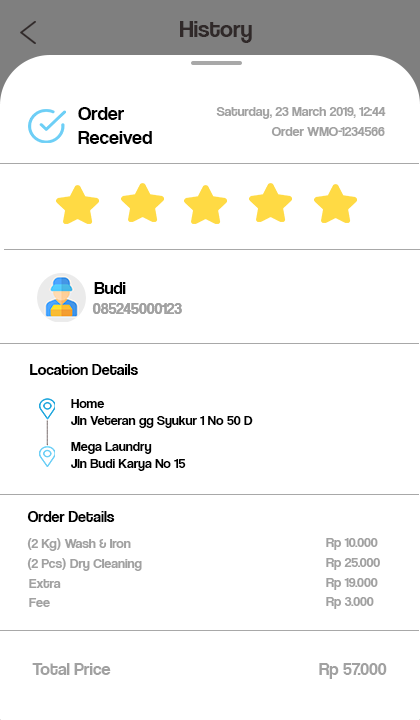
<style>
.page{position:relative;width:420px;height:720px;background:#ffffff}
.page>*{position:absolute;margin:0}
.t1{font:24px "CoolveticaRg-Regular";color:#302929}
.t2{font:20px "CoolveticaRg-Regular";color:#000000}
.t3{font:14px "CoolveticaRg-Regular";color:#a1a1a1}
.t4{font:18px "CoolveticaRg-Regular";color:#010101}
.t5{font:16px "CoolveticaRg-Regular";color:#a1a1a1}
.t6{font:16px "CoolveticaRg-Regular";color:#000000}
.t7{font:14px "CoolveticaRg-Regular";color:#000000}
.t8{font:16px "CoolveticaRg-Regular";color:#010101}
.t9{font:18px "CoolveticaRg-Regular";color:#a1a1a1}
</style>
<div class="page">
<p class="t1" style="left:180px;top:21px;width:72px;height:22px">History</p>
<p class="t2" style="left:78px;top:107px;width:74px;height:37px">Order<br>Received</p>
<p class="t3" style="left:216px;top:107px;width:170px;height:12px">Saturday, 23 March 2019, 12:44</p>
<p class="t3" style="left:271px;top:127px;width:114px;height:9px">Order WMO-1234566</p>
<p class="t4" style="left:94px;top:282px;width:32px;height:12px">Budi</p>
<p class="t5" style="left:92px;top:303px;width:90px;height:11px">085245000123</p>
<p class="t5" style="left:92px;top:303px;width:90px;height:11px">085245000123</p>
<p class="t6" style="left:30px;top:364px;width:108px;height:11px">Location Details</p>
<p class="t7" style="left:71px;top:399px;width:182px;height:29px">Home<br>Jln Veteran gg Syukur 1 No 50 D</p>
<p class="t7" style="left:71px;top:442px;width:115px;height:29px">Mega Laundry<br>Jln Budi Karya No 15</p>
<p class="t8" style="left:27px;top:511px;width:88px;height:11px">Order Details</p>
<p class="t3" style="left:27px;top:538px;width:104px;height:13px">(2 Kg) Wash &amp; Iron</p>
<p class="t3" style="left:326px;top:538px;width:52px;height:12px">Rp 10.000</p>
<p class="t3" style="left:27px;top:558px;width:115px;height:13px">(2 Pcs) Dry Cleaning</p>
<p class="t3" style="left:326px;top:558px;width:54px;height:12px">Rp 25.000</p>
<p class="t3" style="left:29px;top:579px;width:32px;height:9px">Extra</p>
<p class="t3" style="left:326px;top:578px;width:52px;height:12px">Rp 19.000</p>
<p class="t3" style="left:29px;top:598px;width:21px;height:9px">Fee</p>
<p class="t3" style="left:326px;top:597px;width:48px;height:12px">Rp 3.000</p>
<p class="t9" style="left:32px;top:663px;width:79px;height:12px">Total Price</p>
<p class="t9" style="left:319px;top:663px;width:68px;height:16px">Rp 57.000</p>
</div>
